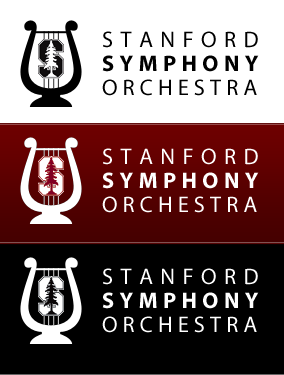
<style>
.page{position:relative;width:284px;height:375px;background:#ffffff}
.page>*{position:absolute;margin:0}
.t1{font:22.5px "MyriadPro-Regular";letter-spacing:0.33em;color:#000000}
.t2{font:22.5px "MyriadPro-Bold";letter-spacing:0.24em;color:#000000}
.t3{font:22.5px "MyriadPro-Regular";letter-spacing:0.226em;color:#000000}
.t4{font:22.5px "MyriadPro-Regular";letter-spacing:0.33em;color:#ffffff}
.t5{font:22.5px "MyriadPro-Bold";letter-spacing:0.24em;color:#ffffff}
.t6{font:22.5px "MyriadPro-Regular";letter-spacing:0.226em;color:#ffffff}
</style>
<div class="page">
<p class="t1" style="left:103px;top:31px;width:155px;height:17px">STANFORD</p>
<p class="t2" style="left:102px;top:55px;width:157px;height:17px">SYMPHONY</p>
<p class="t3" style="left:102px;top:79px;width:155px;height:17px">ORCHESTRA</p>
<p class="t4" style="left:103px;top:148px;width:155px;height:17px">STANFORD</p>
<p class="t5" style="left:102px;top:172px;width:157px;height:17px">SYMPHONY</p>
<p class="t6" style="left:102px;top:196px;width:155px;height:17px">ORCHESTRA</p>
<p class="t4" style="left:103px;top:268px;width:155px;height:17px">STANFORD</p>
<p class="t5" style="left:102px;top:292px;width:157px;height:17px">SYMPHONY</p>
<p class="t6" style="left:102px;top:316px;width:155px;height:17px">ORCHESTRA</p>
</div>
